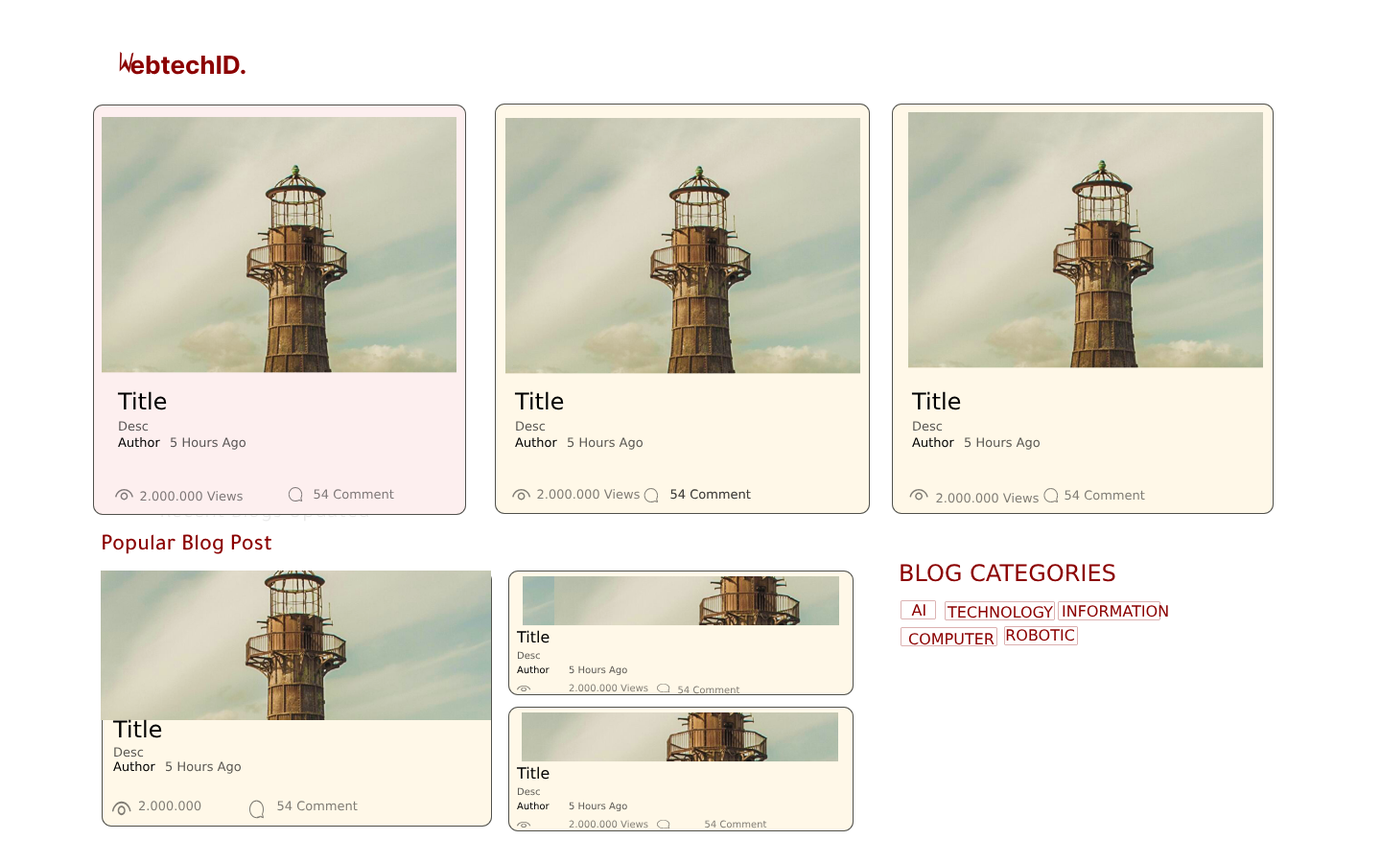
<style>
.page{position:relative;width:1381px;height:863px;background:#ffffff}
.page>*{position:absolute;margin:0}
.t1{font:24.9px "Inter-Bold";color:#8b0000}
.t2{font:23px "SouliyoUnicode";color:#000000}
.t3{font:12.5px "SouliyoUnicode";color:#585353}
.t4{font:12.5px "SouliyoUnicode";color:#595751}
.t5{font:12.5px "SouliyoUnicode";color:#000000}
.t6{font:12.5px "SouliyoUnicode";color:#5b5656}
.t7{font:12.5px "SouliyoUnicode";color:#5c5953}
.t8{font:12.5px "SouliyoUnicode";color:#7e7777}
.t9{font:12.5px "SouliyoUnicode";color:#7f7c74}
.t10{font:12.5px "SouliyoUnicode";color:#3f3e3a}
.t11{font:23px "Tajawal-Medium";color:#8b0000}
.t12{font:23px "SignikaNegativeSC-Regular";color:#8b0000;text-transform:uppercase}
.t13{font:15.3px "SignikaNegativeSC-Regular";color:#8b0000;text-transform:uppercase}
.t14{font:15.3px "SouliyoUnicode";color:#000000}
.t15{font:9.6px "SouliyoUnicode";color:#5d5b55}
.t16{font:9.6px "SouliyoUnicode";color:#000000}
.t17{font:9.6px "SouliyoUnicode";color:#5e5c56}
.t18{font:9.6px "SouliyoUnicode";color:#7f7c74}
.t19{font:9.6px "SouliyoUnicode";color:#827e76}
</style>
<div class="page">
<p class="t1" style="left:130px;top:56px;width:116px;height:19px">ebtechID.</p>
<p class="t2" style="left:117px;top:391px;width:50px;height:20px">Title</p>
<p class="t2" style="left:514px;top:391px;width:50px;height:20px">Title</p>
<p class="t2" style="left:911px;top:391px;width:50px;height:20px">Title</p>
<p class="t3" style="left:119px;top:421px;width:30px;height:11px">Desc</p>
<p class="t4" style="left:516px;top:421px;width:30px;height:11px">Desc</p>
<p class="t4" style="left:913px;top:421px;width:30px;height:11px">Desc</p>
<p class="t5" style="left:118px;top:437px;width:42px;height:11px">Author</p>
<p class="t6" style="left:171px;top:437px;width:76px;height:13px">5 Hours Ago</p>
<p class="t5" style="left:515px;top:437px;width:42px;height:11px">Author</p>
<p class="t7" style="left:568px;top:437px;width:76px;height:13px">5 Hours Ago</p>
<p class="t5" style="left:912px;top:437px;width:42px;height:11px">Author</p>
<p class="t7" style="left:965px;top:437px;width:76px;height:13px">5 Hours Ago</p>
<p class="t8" style="left:140px;top:491px;width:103px;height:11px">2.000.000 Views</p>
<p class="t8" style="left:314px;top:489px;width:80px;height:11px">54 Comment</p>
<p class="t9" style="left:537px;top:489px;width:103px;height:11px">2.000.000 Views</p>
<p class="t10" style="left:670px;top:489px;width:81px;height:11px">54 Comment</p>
<p class="t10" style="left:670px;top:489px;width:81px;height:11px">54 Comment</p>
<p class="t9" style="left:936px;top:493px;width:103px;height:11px">2.000.000 Views</p>
<p class="t9" style="left:1065px;top:490px;width:80px;height:11px">54 Comment</p>
<p class="t11" style="left:103px;top:534px;width:169px;height:20px">Popular Blog Post</p>
<p class="t12" style="left:901px;top:564px;width:215px;height:18px">Blog Categories</p>
<p class="t13" style="left:911px;top:604px;width:15px;height:12px">AI</p>
<p class="t13" style="left:1063px;top:605px;width:105px;height:13px">iNFORMATION</p>
<p class="t13" style="left:947px;top:606px;width:106px;height:13px">Technology</p>
<p class="t13" style="left:1006px;top:629px;width:68px;height:13px">Robotic</p>
<p class="t14" style="left:516px;top:630px;width:34px;height:14px">Title</p>
<p class="t13" style="left:908px;top:633px;width:87px;height:13px">Computer</p>
<p class="t15" style="left:517px;top:651px;width:23px;height:9px">Desc</p>
<p class="t16" style="left:517px;top:666px;width:33px;height:8px">Author</p>
<p class="t17" style="left:569px;top:666px;width:58px;height:10px">5 Hours Ago</p>
<p class="t18" style="left:569px;top:684px;width:79px;height:9px">2.000.000 Views</p>
<p class="t19" style="left:678px;top:686px;width:63px;height:8px">54 Comment</p>
<p class="t2" style="left:112px;top:719px;width:50px;height:20px">Title</p>
<p class="t4" style="left:114px;top:747px;width:30px;height:11px">Desc</p>
<p class="t5" style="left:113px;top:762px;width:42px;height:10px">Author</p>
<p class="t7" style="left:166px;top:762px;width:76px;height:12px">5 Hours Ago</p>
<p class="t14" style="left:516px;top:766px;width:34px;height:14px">Title</p>
<p class="t15" style="left:517px;top:788px;width:23px;height:8px">Desc</p>
<p class="t9" style="left:138px;top:801px;width:63px;height:10px">2.000.000 Views</p>
<p class="t9" style="left:277px;top:801px;width:81px;height:10px">54 Comment</p>
<p class="t16" style="left:517px;top:802px;width:33px;height:9px">Author</p>
<p class="t17" style="left:569px;top:802px;width:58px;height:10px">5 Hours Ago</p>
<p class="t18" style="left:569px;top:820px;width:79px;height:9px">2.000.000 Views</p>
<p class="t19" style="left:705px;top:820px;width:62px;height:9px">54 Comment</p>
</div>
